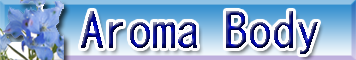
<style>
.page{position:relative;width:356px;height:60px}
.page>*{position:absolute;margin:0}
.t1{font:48px "MS-Gothic"}
</style>
<div class="page">
<p class="t1" style="left:81px;top:11px;width:237px;height:43px">Aroma Body</p>
</div>
